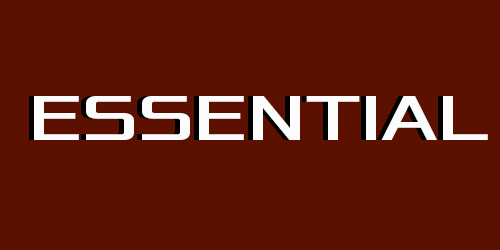
<style>
.page{position:relative;width:500px;height:250px;background:#5c1100}
.page>*{position:absolute;margin:0}
.t1{font:66.7px "Xolonium";color:#fcfcfc}
</style>
<div class="page">
<p class="t1" style="left:34px;top:96px;width:454px;height:44px">ESSENTIAL</p>
</div>
